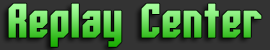
<style>
.page{position:relative;width:270px;height:50px;background:#333333}
.page>*{position:absolute;margin:0}
.t1{font:47.9px "Whitestone-Bold"}
</style>
<div class="page">
<p class="t1" style="left:8px;top:3px;width:254px;height:44px">Replay Center</p>
</div>
